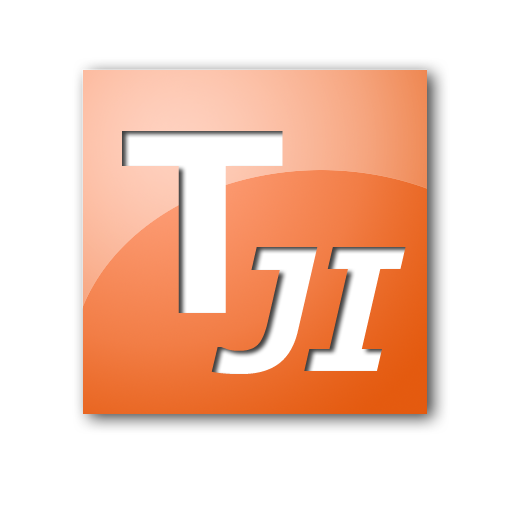
<style>
.page{position:relative;width:512px;height:512px;background:#ffffff}
.page>*{position:absolute;margin:0}
.t1{font:250px "Verdana-Bold";color:#ffffff}
.t2{font:170px "Verdana-BoldItalic";color:#ffffff}
</style>
<div class="page">
<p class="t1" style="left:122px;top:131px;width:161px;height:182px">T</p>
<p class="t2" style="left:211px;top:247px;width:107px;height:127px">J</p>
<p class="t2" style="left:304px;top:247px;width:102px;height:124px">I</p>
</div>
